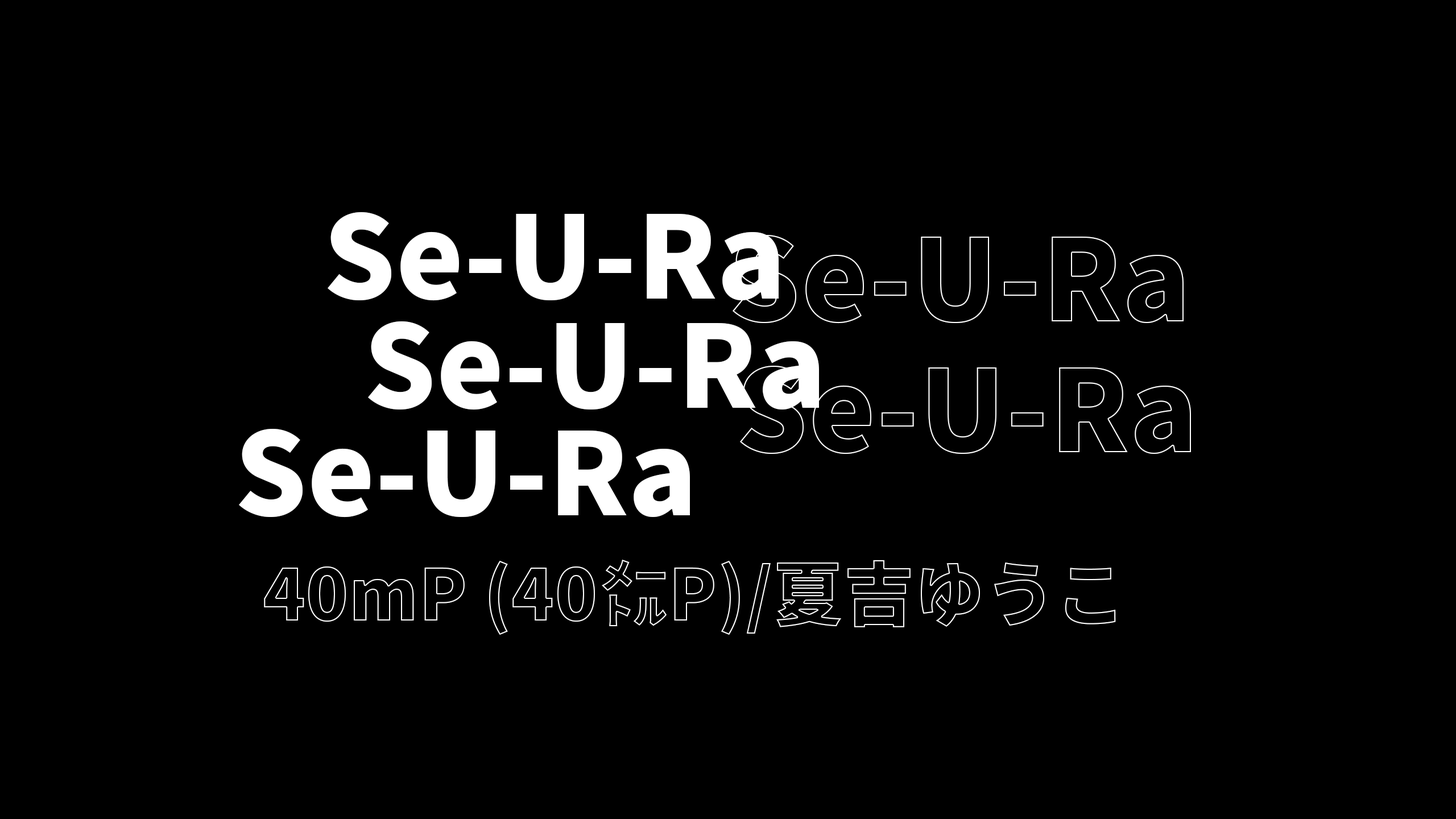
<style>
.page{position:relative;width:1456px;height:819px;background:#000000}
.page>*{position:absolute;margin:0}
.t1{font:113.5px "SourceHanSansSC-Heavy";color:#ffffff}
.t2{font:70.7px "SourceHanSansSC-Heavy";color:#000000}
</style>
<div class="page">
<p class="t1" style="left:328px;top:212px;width:451px;height:89px">Se-U-Ra</p>
<p class="t1" style="left:368px;top:321px;width:451px;height:89px">Se-U-Ra</p>
<p class="t1" style="left:239px;top:429px;width:451px;height:89px">Se-U-Ra</p>
<p class="t2" style="left:264px;top:560px;width:852px;height:75px">40mP (40㍍P)/夏吉ゆうこ</p>
</div>
